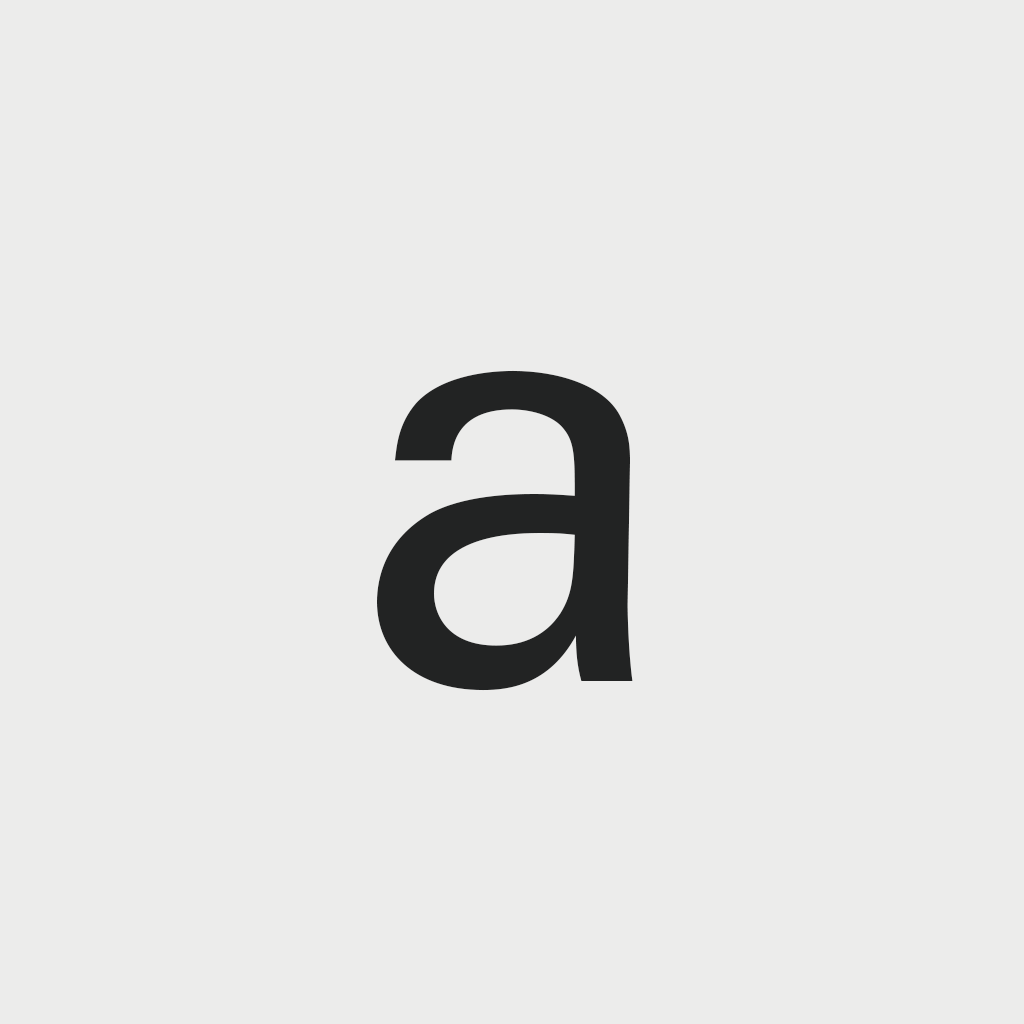
<style>
.page{position:relative;width:1024px;height:1024px;background:#ececeb}
.page>*{position:absolute;margin:0}
.t1{font:600px "Univers";letter-spacing:0.01em;color:#222323}
</style>
<div class="page">
<p class="t1" style="left:377px;top:370px;width:256px;height:321px">a</p>
</div>
